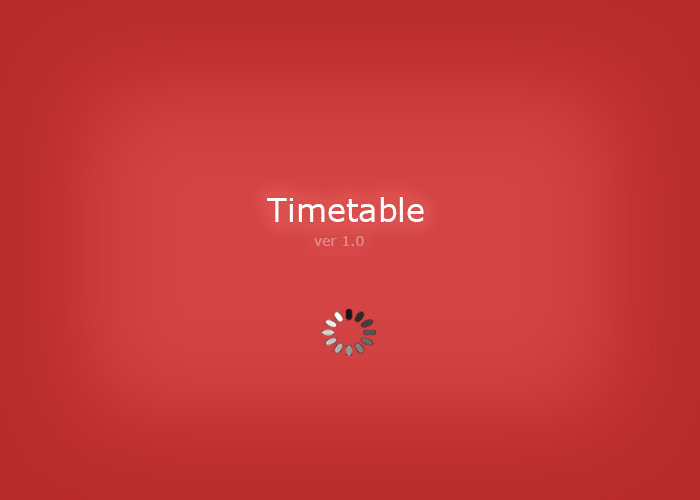
<style>
.page{position:relative;width:700px;height:500px}
.page>*{position:absolute;margin:0}
.t1{font:32px "Verdana";color:#ffffff}
.t2{font:14px "Verdana";color:#e28e8e}
</style>
<div class="page">
<p class="t1" style="left:267px;top:197px;width:157px;height:25px">Timetable</p>
<p class="t2" style="left:314px;top:236px;width:50px;height:10px">ver 1.0</p>
</div>
